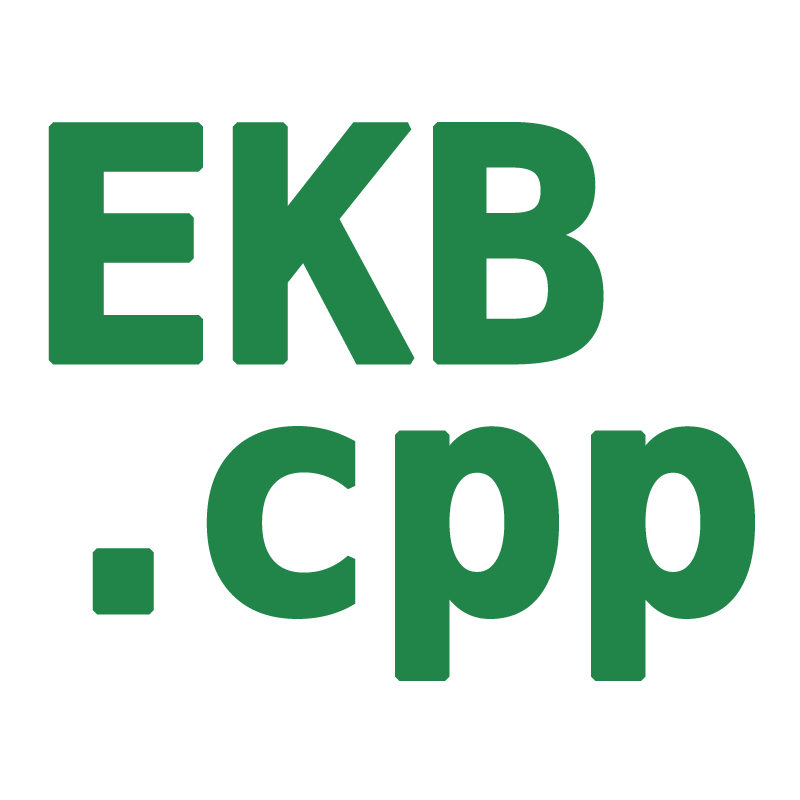
<style>
.page{position:relative;width:800px;height:800px;background:#ffffff}
.page>*{position:absolute;margin:0}
.t1{font:320px/250px "MesloLGLDZ-Bold";color:#218549;font-weight:bold}
</style>
<div class="page">
<p class="t1" style="left:48px;top:122px;width:707px;height:559px">EKB<br>.cpp</p>
</div>
